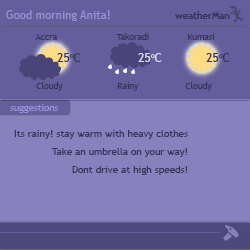
<style>
.page{position:relative;width:250px;height:250px;background:#8781bd}
.page>*{position:absolute;margin:0}
.t1{font:11.6px "TrebuchetMS";color:#9891d6}
.t2{font:9.8px "TrebuchetMS-Bold";color:#39355a;scale:0.97 1}
.t3{font:14.7px "TrebuchetMS";color:#39355a}
.t4{font:12px "TrebuchetMS";color:#39355a}
.t5{font:12px "TrebuchetMS";color:#dad9e7}
.t6{font:9.8px "TrebuchetMS";color:#9891d6;scale:0.97 1}
.t7{font:9.8px "TrebuchetMS";color:#39355a}
</style>
<div class="page">
<p class="t1" style="left:6px;top:10px;width:104px;height:11px">Good morning Anita!</p>
<p class="t2" style="left:175px;top:11px;width:55px;height:8px">weatherMan</p>
<p class="t3" style="left:35px;top:34px;width:22px;height:6px">Accra</p>
<p class="t3" style="left:116px;top:33px;width:33px;height:7px">Takoradi</p>
<p class="t3" style="left:188px;top:33px;width:26px;height:7px">Kumasi</p>
<p class="t4" style="left:57px;top:53px;width:24px;height:9px">25oC</p>
<p class="t5" style="left:138px;top:53px;width:24px;height:9px">25oC</p>
<p class="t4" style="left:206px;top:53px;width:24px;height:9px">25oC</p>
<p class="t3" style="left:36px;top:82px;width:27px;height:9px">Cloudy</p>
<p class="t3" style="left:117px;top:82px;width:22px;height:9px">Rainy</p>
<p class="t3" style="left:185px;top:82px;width:27px;height:9px">Cloudy</p>
<p class="t6" style="left:10px;top:104px;width:49px;height:9px">suggestions</p>
<p class="t7" style="left:14px;top:130px;width:174px;height:9px">Its rainy! stay warm with heavy clothes</p>
<p class="t7" style="left:51px;top:148px;width:137px;height:9px">Take an umbrella on your way!</p>
<p class="t7" style="left:72px;top:166px;width:116px;height:9px">Dont drive at high speeds!</p>
</div>
